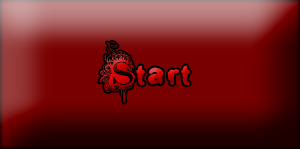
<style>
.page{position:relative;width:300px;height:149px}
.page>*{position:absolute;margin:0}
.t1{font:48px "VtksRevolt"}
</style>
<div class="page">
<p class="t1" style="left:99px;top:41px;width:91px;height:62px">Start</p>
</div>
